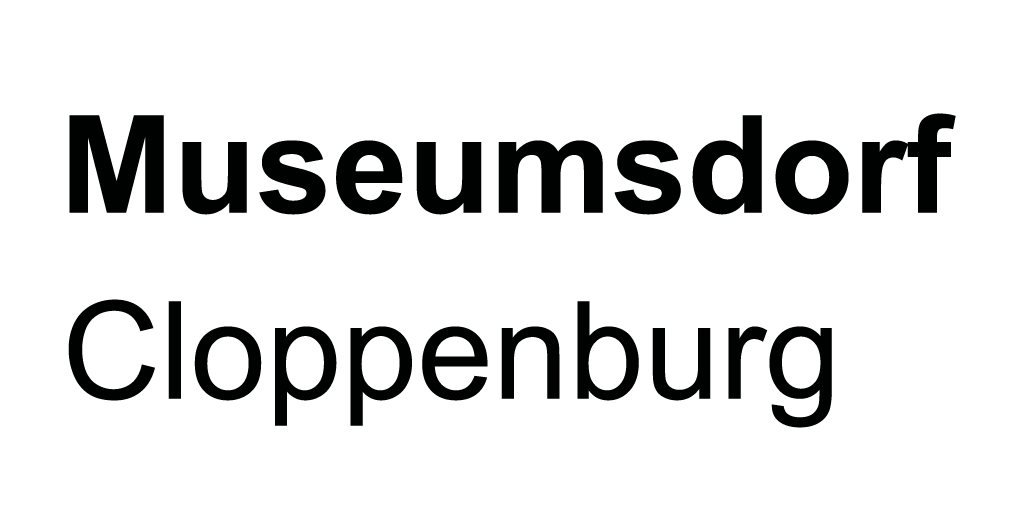
<style>
.page{position:relative;width:1024px;height:512px;background:#ffffff}
.page>*{position:absolute;margin:0}
.t1{font:136px "Arial-BoldMT";color:#000101}
.t2{font:136px "ArialMT";color:#000101}
</style>
<div class="page">
<p class="t1" style="left:69px;top:113px;width:887px;height:102px">Museumsdorf</p>
<p class="t2" style="left:68px;top:299px;width:764px;height:129px">Cloppenburg</p>
</div>
